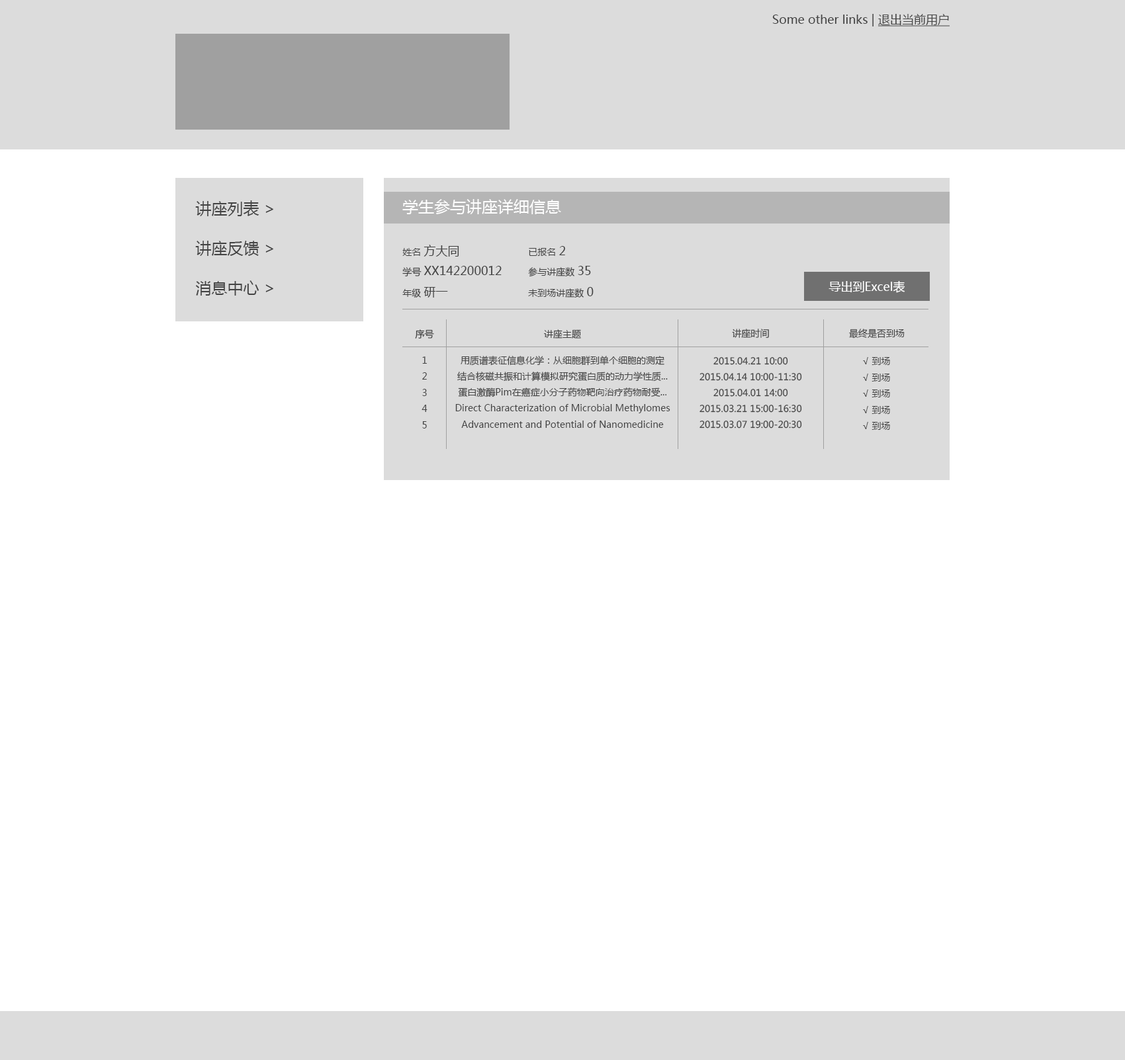
<style>
.page{position:relative;width:1125px;height:1060px;background:#ffffff}
.page>*{position:absolute;margin:0}
.t1{font:11.9px "MicrosoftYaHei";color:#434343}
.t2{font:11.9px "MicrosoftYaHei";color:#434343;text-decoration:underline}
.t3{font:15.9px/39.7px "MicrosoftYaHei";color:#434343}
.t4{font:15.9px "MicrosoftYaHei";color:#ffffff}
.t5{font:9.3px/19.8px "MicrosoftYaHei";color:#434343}
.t6{font:11.9px/15.9px "MicrosoftYaHei";color:#434343}
.t7{font:11.9px/19.8px "MicrosoftYaHei";color:#434343}
.t8{font:11.9px "MicrosoftYaHei";color:#ffffff}
.t9{font:9.3px "MicrosoftYaHei";color:#434343}
.t10{font:9.3px/15.9px "MicrosoftYaHei";color:#434343}
</style>
<div class="page">
<p class="t1" style="left:772px;top:14px;width:177px;height:12px">Some other links | <span class="t2">退出当前用户</span></p>
<p class="t3" style="left:195px;top:200px;width:78px;height:96px">讲座列表 &gt;<br>讲座反馈 &gt;<br>消息中心 &gt;</p>
<p class="t4" style="left:402px;top:199px;width:159px;height:15px">学生参与讲座详细信息</p>
<p class="t1" style="left:402px;top:245px;width:99px;height:53px"><span class="t5">姓名 </span><span class="t6">方大同<br></span><span class="t5">学号 </span>XX142200012<br><span class="t5">年级 </span><span class="t7">研一</span></p>
<p class="t5" style="left:528px;top:246px;width:65px;height:52px">已报名 <span class="t6">2<br></span>参与讲座数 <span class="t1">35<br></span>未到场讲座数 <span class="t7">0</span></p>
<p class="t8" style="left:828px;top:280px;width:77px;height:13px">导出到Excel表</p>
<p class="t9" style="left:415px;top:329px;width:19px;height:10px">序号</p>
<p class="t9" style="left:544px;top:329px;width:37px;height:10px">讲座主题</p>
<p class="t9" style="left:732px;top:329px;width:37px;height:9px">讲座时间</p>
<p class="t9" style="left:849px;top:329px;width:55px;height:10px">最终是否到场</p>
<p class="t9" style="left:421px;top:357px;width:6px;height:72px;text-align:center">1<br>2<br>3<br>4<br>5</p>
<p class="t9" style="left:455px;top:356px;width:215px;height:72px;text-align:center"><span class="t10">用质谱表征信息化学：从细胞群到单个细胞的测定<br>结合核磁共振和计算模拟研究蛋白质的动力学性质...<br>蛋白激酶Pim在癌症小分子药物靶向治疗药物耐受...<br></span>Direct Characterization of Microbial Methylomes<br>Advancement and Potential of Nanomedicine</p>
<p class="t10" style="left:699px;top:357px;width:103px;height:72px;text-align:center">2015.04.21 10:00<br>2015.04.14 10:00-11:30<br>2015.04.01 14:00<br>2015.03.21 15:00-16:30<br>2015.03.07 19:00-20:30</p>
<p class="t9" style="left:863px;top:357px;width:27px;height:73px;text-align:center">√ 到场<br>√ 到场<br>√ 到场<br>√ 到场<br>√ 到场</p>
</div>
